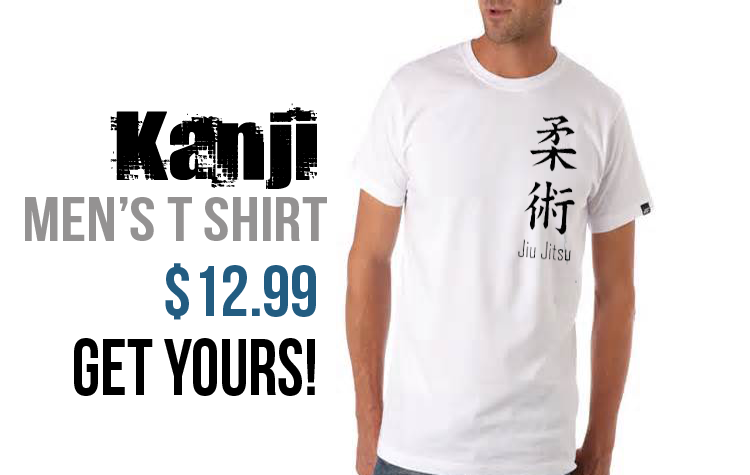
<style>
.page{position:relative;width:750px;height:475px;background:#ffffff}
.page>*{position:absolute;margin:0}
.t1{font:117.7px "DocteurAtomic";color:#000000;scale:1.18 1}
.t2{font:61.6px "BebasNeue";color:#949292;scale:1.15 1}
.t3{font:71px "BebasNeue";color:#225c81}
.t4{font:80.5px "BebasNeue";color:#000000;scale:0.89 1}
</style>
<div class="page">
<p class="t1" style="left:110px;top:103px;width:207px;height:86px">Kanji</p>
<p class="t2" style="left:25px;top:197px;width:302px;height:44px">Men’s t shirt</p>
<p class="t3" style="left:165px;top:263px;width:151px;height:57px">$12.99</p>
<p class="t4" style="left:74px;top:338px;width:241px;height:58px">get yours!</p>
</div>
